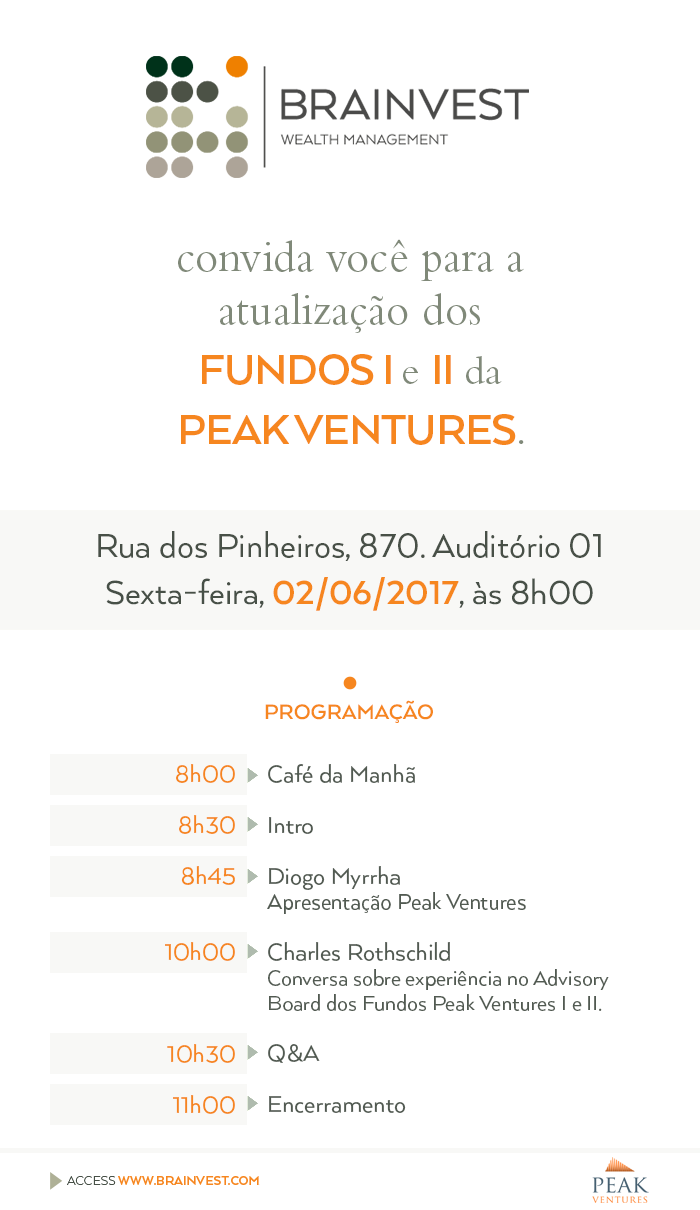
<style>
.page{position:relative;width:700px;height:1210px;background:#ffffff}
.page>*{position:absolute;margin:0}
.t1{font:45px/53px "BemboStd";color:#808979}
.t2{font:48px/60px "ArquitectaBold";letter-spacing:-0.025em;color:#f6861f;text-transform:uppercase}
.t3{font:42px/53px "BemboStd";color:#808979}
.t4{font:38.2px "Arquitecta";color:#485047}
.t5{font:38.2px "Arquitecta";color:#475047}
.t6{font:38.2px "ArquitectaBold";color:#f6861f}
.t7{font:24px "ArquitectaBold";color:#f6861f;text-transform:uppercase}
.t8{font:27px/51px "Arquitecta";color:#f6861f}
.t9{font:24px/25px "Arquitecta";color:#515a51}
.t10{font:27px/51px "Arquitecta";color:#515a51}
.t11{font:25px/25px "Arquitecta";color:#515a51}
</style>
<div class="page">
<p class="t1" style="left:178px;top:239px;width:346px;height:206px;text-align:center">convida você para a <br>atualização dos <br><span class="t2">FundoS I </span><span class="t3">e </span><span class="t2">II</span><span class="t3"> da <br></span><span class="t2">peak Ventures</span><span class="t3">.</span></p>
<p class="t4" style="left:98px;top:531px;width:503px;height:30px">Rua dos Pinheiros, 870. Auditório 01</p>
<p class="t5" style="left:106px;top:577px;width:487px;height:34px">Sexta-feira, <span class="t6">02/06/2017</span>, às 8h00</p>
<p class="t7" style="left:265px;top:700px;width:168px;height:23px">Programação</p>
<p class="t8" style="left:165px;top:764px;width:70px;height:350px;text-align:right">8h00<br>8h30<br>8h45<br><br>10h00<br><br>10h30<br>11h00</p>
<p class="t9" style="left:267px;top:764px;width:342px;height:349px"><span class="t10">Café da Manhã<br>Intro<br>Diogo Myrrha<br></span><span class="t11">Apresentação Peak Ventures<br></span><span class="t10">Charles Rothschild<br></span>Conversa sobre experiência no Advisory Board dos Fundos Peak Ventures I e II.<br><span class="t10">Q&amp;A<br>Encerramento</span></p>
</div>
